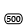
<style>
.page{position:relative;width:27px;height:26px;background:#ffffff}
.page>*{position:absolute;margin:0}
.t1{font:9px "BookAntiqua";letter-spacing:0.04em;color:#000000}
</style>
<div class="page">
<p class="t1" style="left:6px;top:16px;width:15px;height:6px">500</p>
</div>
